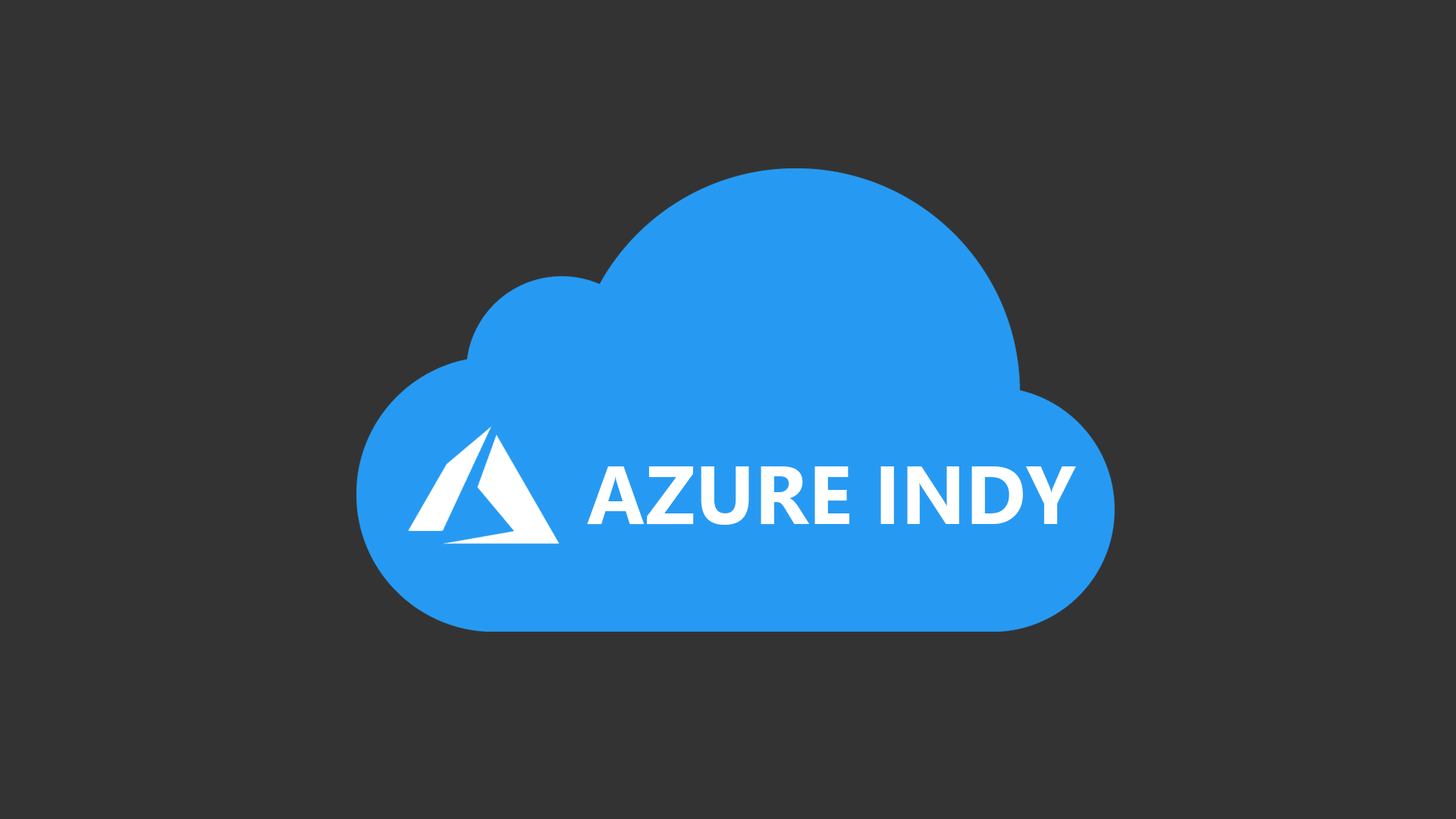
<style>
.page{position:relative;width:1456px;height:819px;background:#333333}
.page>*{position:absolute;margin:0}
.t1{font:82.2px "SegoeUI-Bold";color:#ffffff}
</style>
<div class="page">
<p class="t1" style="left:587px;top:466px;width:489px;height:59px">AZURE INDY</p>
</div>
